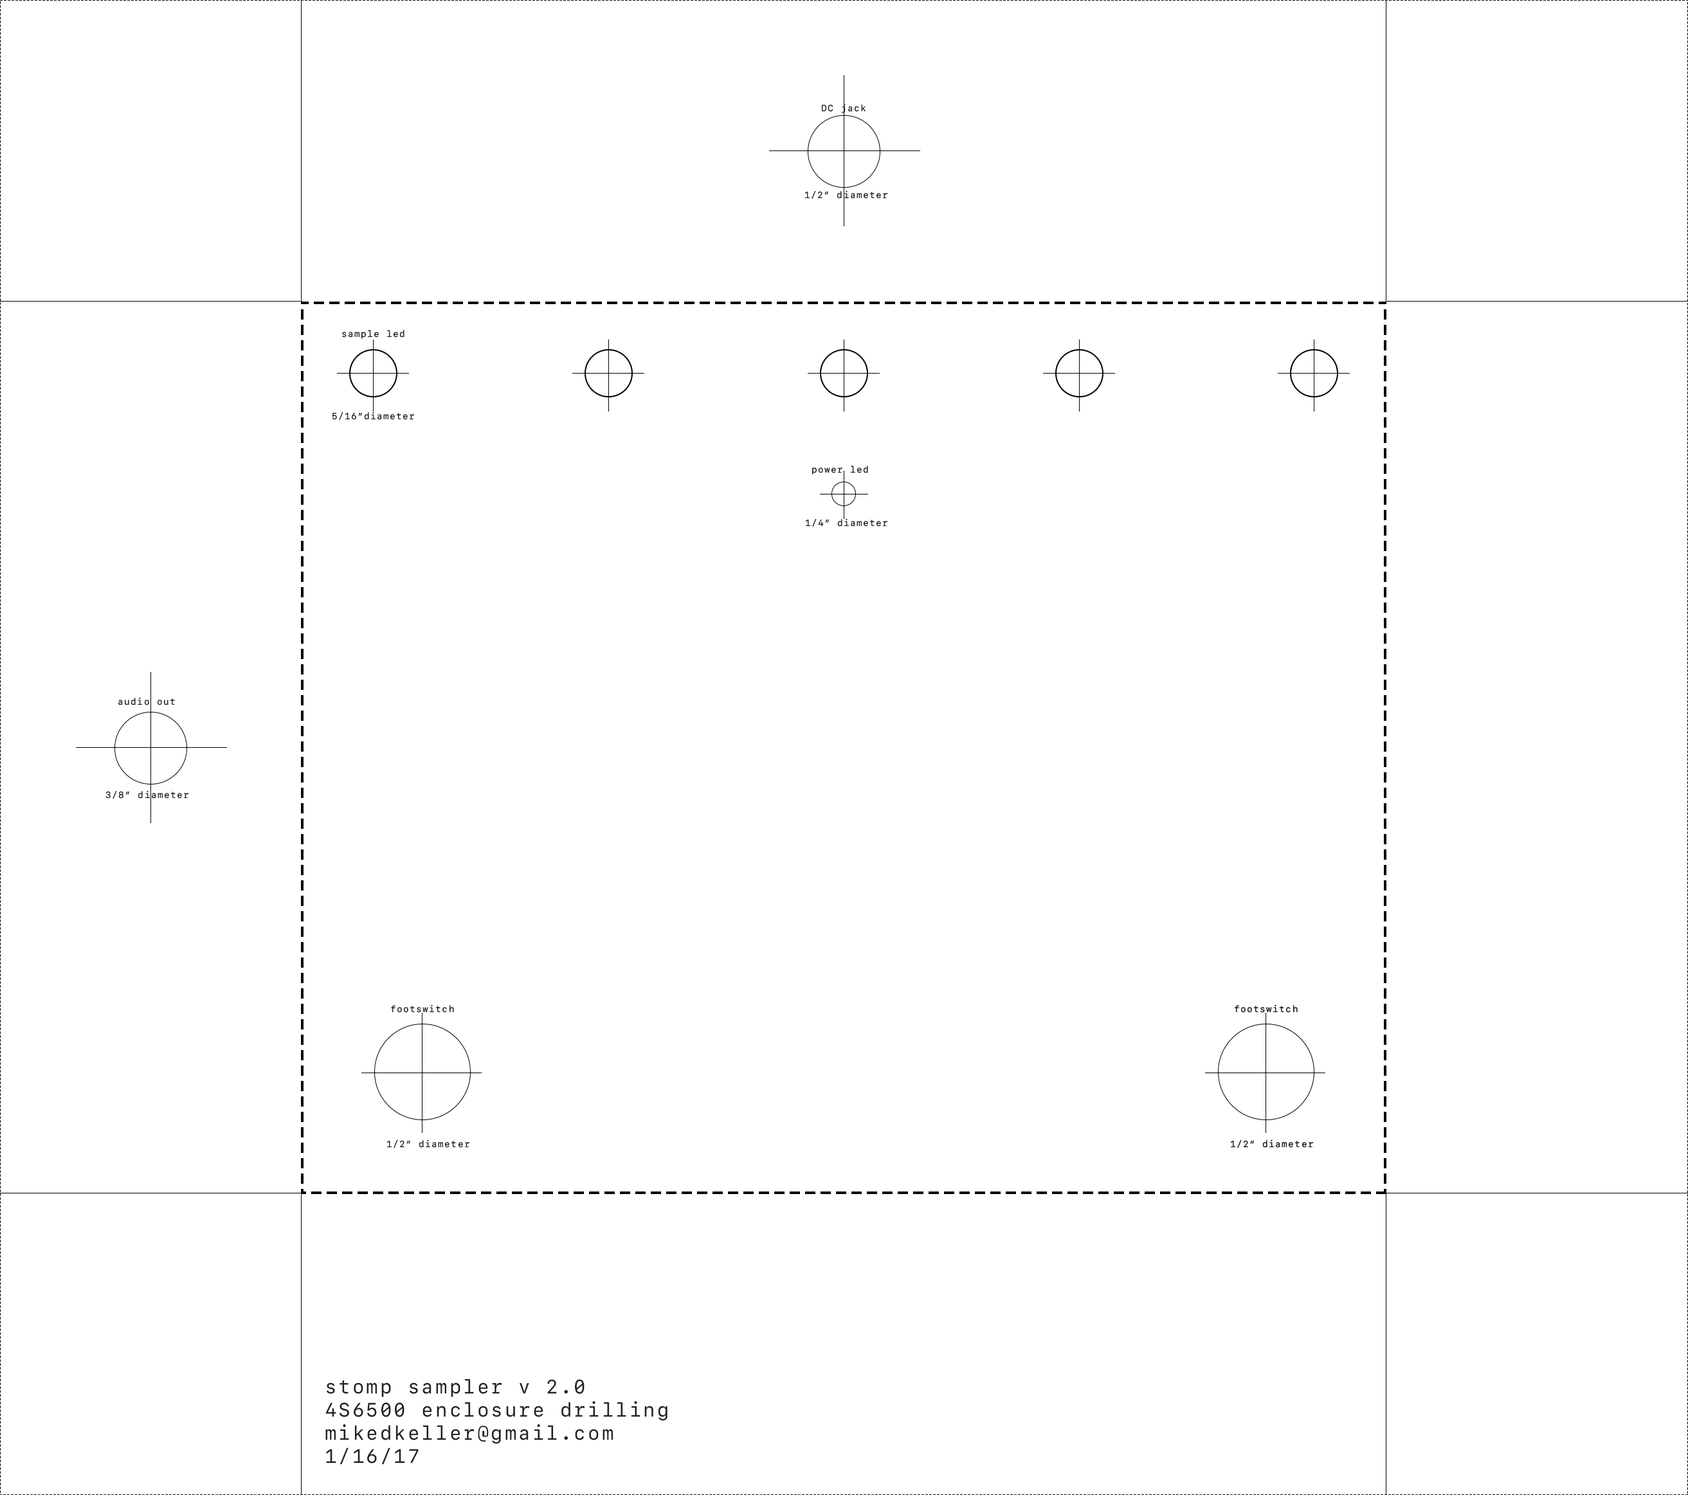
<style>
.page{position:relative;width:1688px;height:1495px;background:#ffffff}
.page>*{position:absolute;margin:0}
.t1{font:9px "SFMono-Regular";letter-spacing:0.1em;color:#212121}
.t2{font:19.3px "SFMono-Regular";letter-spacing:0.1em;color:#212121}
</style>
<div class="page">
<p class="t1" style="left:822px;top:104px;width:43px;height:9px">DC jack</p>
<p class="t1" style="left:805px;top:190px;width:82px;height:9px">1/2” diameter</p>
<p class="t1" style="left:342px;top:330px;width:62px;height:9px">sample led</p>
<p class="t1" style="left:332px;top:411px;width:82px;height:9px">5/16”diameter</p>
<p class="t1" style="left:812px;top:465px;width:56px;height:9px">power led</p>
<p class="t1" style="left:806px;top:518px;width:81px;height:8px">1/4” diameter</p>
<p class="t1" style="left:118px;top:697px;width:57px;height:8px">audio out</p>
<p class="t1" style="left:105px;top:790px;width:83px;height:8px">3/8” diameter</p>
<p class="t1" style="left:391px;top:1004px;width:63px;height:9px">footswitch</p>
<p class="t1" style="left:387px;top:1139px;width:82px;height:9px">1/2” diameter</p>
<p class="t2" style="left:325px;top:1378px;width:342px;height:86px">stomp sampler v 2.0<br>4S6500 enclosure drilling<br>mikedkeller@gmail.com<br>1/16/17</p>
</div>
